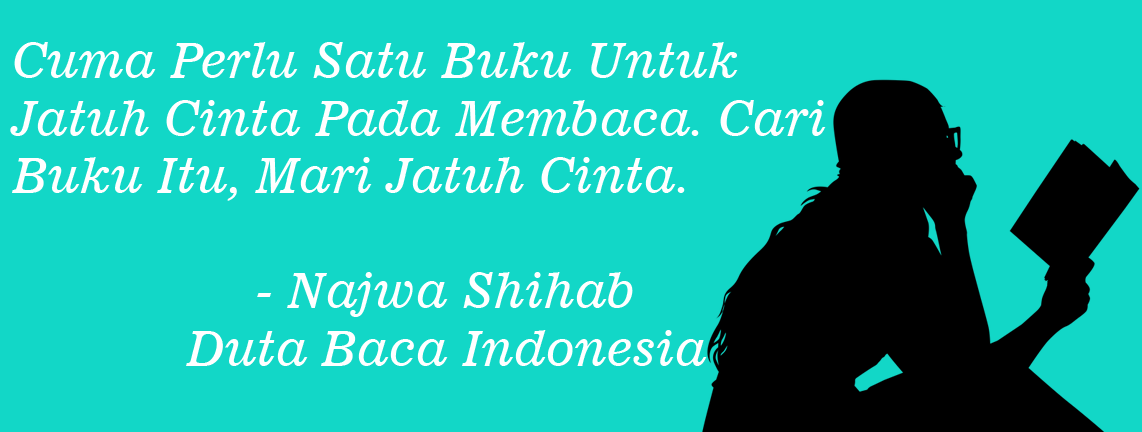
<style>
.page{position:relative;width:1142px;height:432px;background:#12d7c7}
.page>*{position:absolute;margin:0}
.t1{font:48px "News701BT-ItalicA";color:#ffffff}
</style>
<div class="page">
<p class="t1" style="left:10px;top:42px;width:816px;height:324px">Cuma Perlu Satu Buku Untuk Jatuh Cinta Pada Membaca. Cari Buku Itu, Mari Jatuh Cinta.<br><br>- Najwa Shihab<br>Duta Baca Indonesia</p>
</div>
